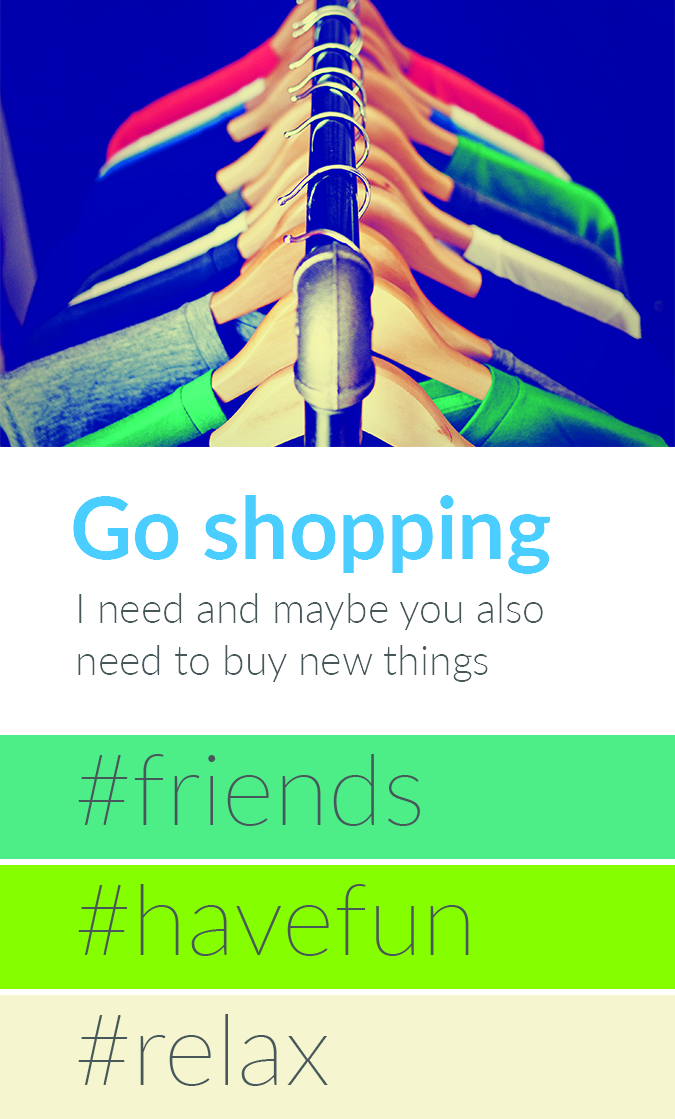
<style>
.page{position:relative;width:675px;height:1119px;background:#ffffff}
.page>*{position:absolute;margin:0}
.t1{font:86px "Lato-Bold";color:#4acdff}
.t2{font:41px/52px "Lato-Light";color:#48585a}
</style>
<div class="page">
<p class="t1" style="left:73px;top:495px;width:477px;height:79px">Go shopping</p>
<p class="t2" style="left:78px;top:593px;width:465px;height:89px;text-align:right">I need and maybe you also need to buy new things</p>
</div>
